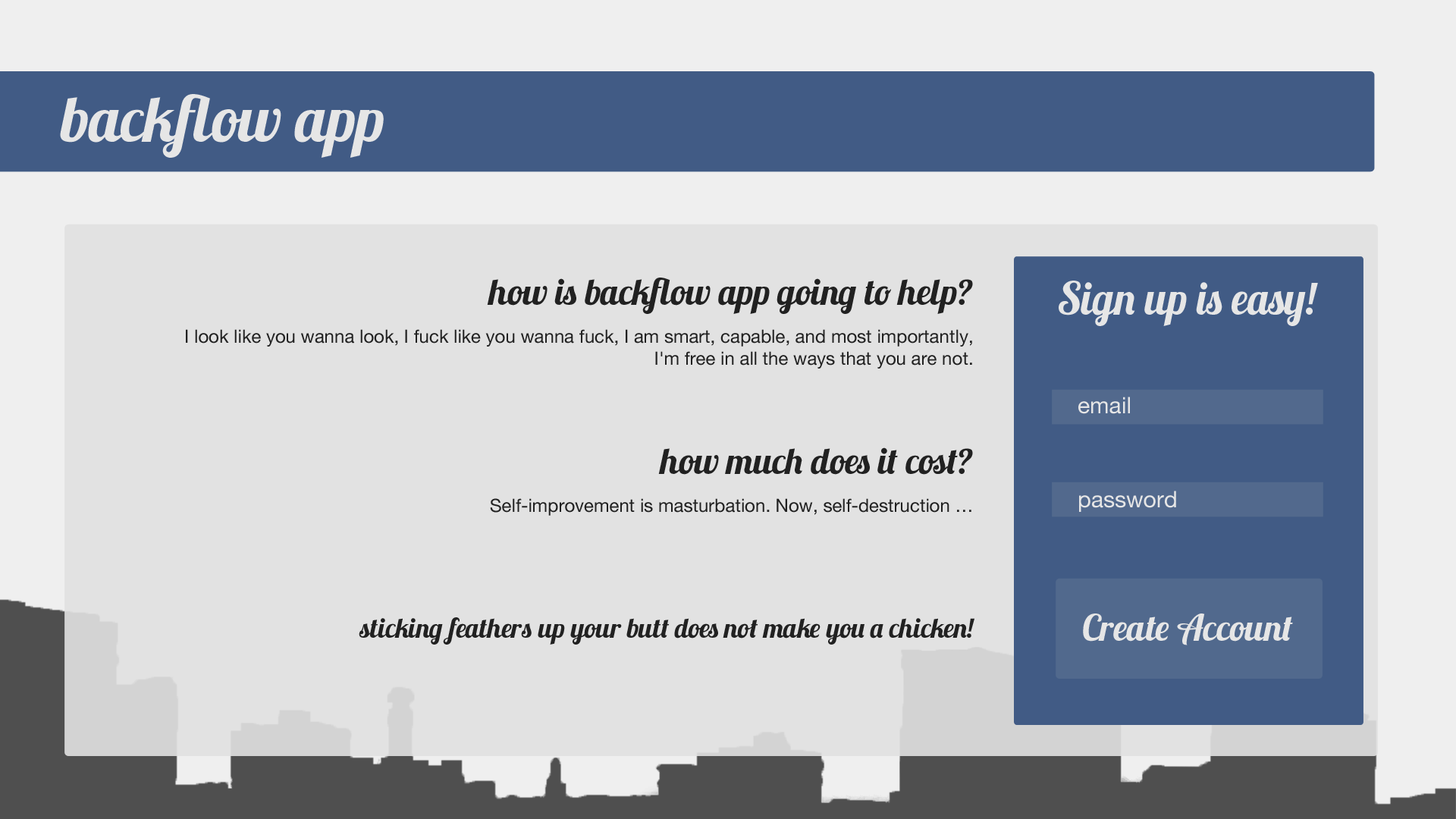
<style>
.page{position:relative;width:1456px;height:819px;background:#e2e2e2}
.page>*{position:absolute;margin:0}
.t1{font:63.8px "Lobster1.3";color:#e6e6e6}
.t2{font:18.2px "HelveticaNeue";color:#212121}
.t3{font:36.4px "Lobster1.3";color:#212121}
.t4{font:27.3px "Lobster1.3";color:#212121}
.t5{font:45.5px "Lobster1.3";color:#e6e6e6;scale:0.95 1}
.t6{font:22.7px "HelveticaNeue";color:#e6e6e6}
.t7{font:36.4px "Lobster1.3";color:#e6e6e6}
</style>
<div class="page">
<p class="t1" style="left:60px;top:94px;width:324px;height:64px">backflow app</p>
<p class="t2" style="left:186px;top:278px;width:788px;height:367px;text-align:right"><span class="t3"><br>how is backflow app going to help?<br><br></span>I look like you wanna look, I fuck like you wanna fuck, I am smart, capable, and most importantly, I'm free in all the ways that you are not.<br><br><span class="t3"><br>how much does it cost?<br><br></span>Self-improvement is masturbation. Now, self-destruction …<br><br><span class="t4"><br><br>sticking feathers up your butt does not make you a chicken!</span></p>
<p class="t5" style="left:1059px;top:281px;width:259px;height:45px">Sign up is easy!</p>
<p class="t6" style="left:1078px;top:397px;width:52px;height:17px">email</p>
<p class="t6" style="left:1079px;top:491px;width:97px;height:21px">password</p>
<p class="t7" style="left:1083px;top:613px;width:210px;height:32px">Create Account</p>
</div>
